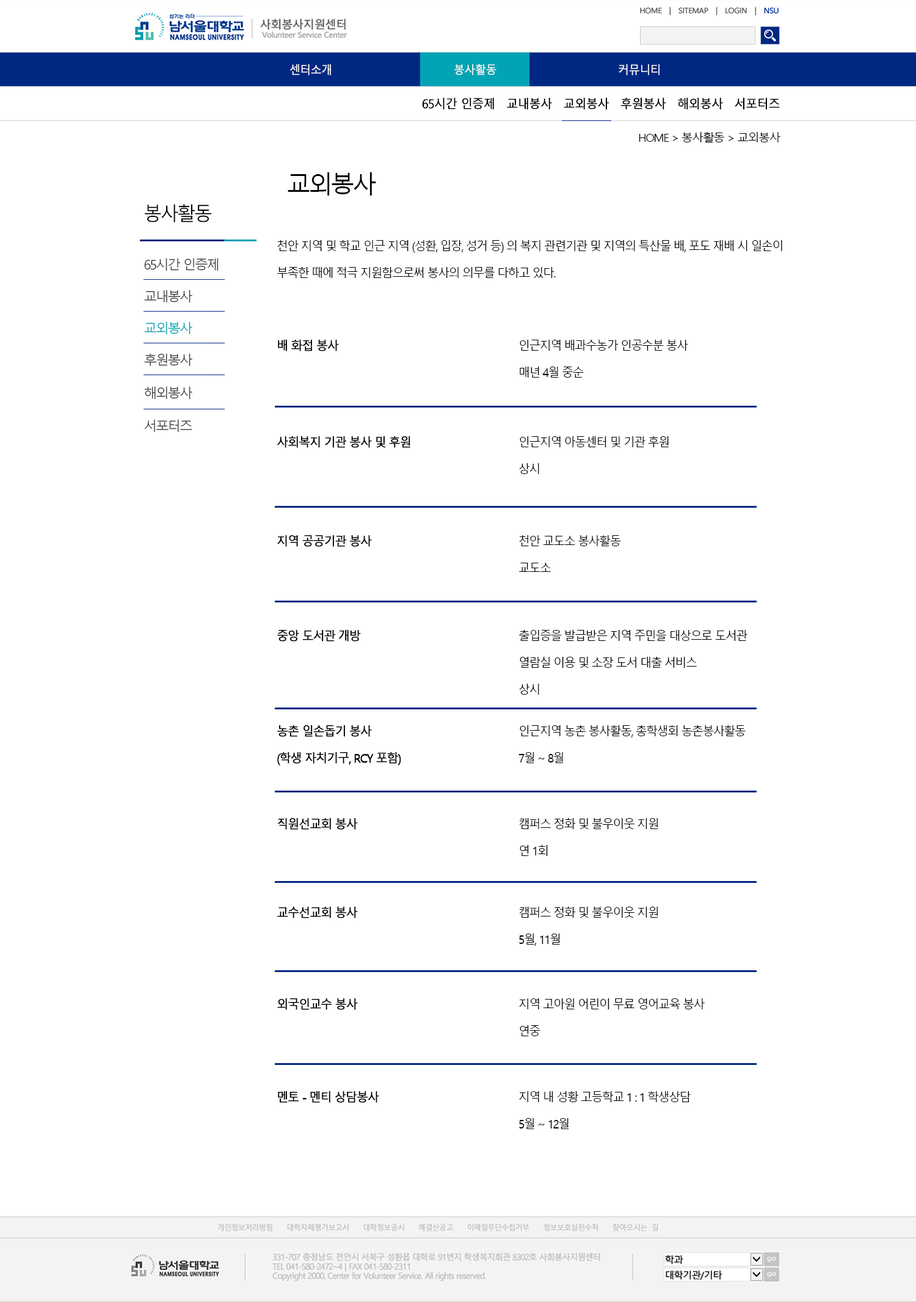
<style>
.page{position:relative;width:916px;height:1302px;background:#ffffff}
.page>*{position:absolute;margin:0}
.t1{font:11.4px "MalgunGothicRegular";letter-spacing:-0.05em;color:#f3f3f3;font-weight:bold;scale:0.95 1}
.t2{font:12.2px "MalgunGothicRegular";letter-spacing:-0.05em;color:#000000;font-weight:bold;scale:0.95 1}
.t3{font:11.3px "MalgunGothicRegular";letter-spacing:-0.1em;color:#000000;scale:1.05 1}
.t4{font:24.4px "MalgunGothicRegular";letter-spacing:-0.1em;color:#000000}
.t5{font:19px "MalgunGothicRegular";letter-spacing:-0.1em;color:#000000}
.t6{font:12.5px/26.9px "MalgunGothicRegular";letter-spacing:-0.1em;color:#000000;scale:0.95 1}
.t7{font:13.2px "MalgunGothicRegular";letter-spacing:-0.1em;color:#454444}
.t8{font:13.2px "MalgunGothicRegular";letter-spacing:-0.1em;color:#01a3b5}
.t9{font:12.5px/26.9px "MalgunGothicRegular";letter-spacing:-0.1em;color:#000000;font-weight:bold;scale:0.95 1}
</style>
<div class="page">
<p class="t1" style="left:290px;top:64px;width:370px;height:11px">센터소개        봉사활동       커뮤니티</p>
<p class="t2" style="left:422px;top:98px;width:358px;height:11px">65시간 인증제　교내봉사　교외봉사　후원봉사　해외봉사　서포터즈</p>
<p class="t3" style="left:639px;top:132px;width:142px;height:11px">HOME &gt; 봉사활동 &gt; 교외봉사</p>
<p class="t4" style="left:288px;top:172px;width:88px;height:23px">교외봉사</p>
<p class="t5" style="left:145px;top:204px;width:66px;height:18px">봉사활동</p>
<p class="t6" style="left:277px;top:240px;width:505px;height:38px">천안 지역 및 학교 인근 지역 (성환, 입장, 성거 등) 의 복지 관련기관 및 지역의 특산물 배, 포도 재배 시 일손이<br>부족한 때에 적극 지원함으로써 봉사의 의무를 다하고 있다.</p>
<p class="t7" style="left:144px;top:258px;width:75px;height:13px">65시간 인증제</p>
<p class="t7" style="left:144px;top:290px;width:48px;height:13px">교내봉사</p>
<p class="t8" style="left:144px;top:321px;width:48px;height:14px">교외봉사</p>
<p class="t6" style="left:278px;top:340px;width:410px;height:37px"><span class="t9">배 화접 봉사</span>          인근지역 배과수농가 인공수분 봉사<br>      　     매년 4월 중순</p>
<p class="t7" style="left:144px;top:353px;width:48px;height:13px">후원봉사</p>
<p class="t7" style="left:144px;top:386px;width:48px;height:13px">해외봉사</p>
<p class="t7" style="left:144px;top:419px;width:48px;height:13px">서포터즈</p>
<p class="t6" style="left:277px;top:436px;width:392px;height:38px"><span class="t9">사회복지 기관 봉사 및 후원    　  </span>인근지역 아동센터 및 기관 후원<br>      　     상시</p>
<p class="t6" style="left:277px;top:535px;width:344px;height:37px"><span class="t9">지역 공공기관 봉사        </span>천안 교도소 봉사활동<br>           교도소</p>
<p class="t6" style="left:277px;top:630px;width:471px;height:64px"><span class="t9">중앙 도서관 개방         </span>출입증을 발급받은 지역 주민을 대상으로 도서관<br>           열람실 이용 및 소장 도서 대출 서비스<br>           상시</p>
<p class="t6" style="left:277px;top:725px;width:469px;height:40px"><span class="t9">농촌 일손돕기 봉사        </span>인근지역 농촌 봉사활동, 총학생회 농촌봉사활동<br><span class="t9">(학생 자치기구, RCY 포함)</span>       7월 ~ 8월</p>
<p class="t6" style="left:277px;top:818px;width:381px;height:38px"><span class="t9">직원선교회 봉사         </span>캠퍼스 정화 및 불우이웃 지원<br>           연 1회</p>
<p class="t6" style="left:277px;top:906px;width:381px;height:39px"><span class="t9">교수선교회 봉사         </span>캠퍼스 정화 및 불우이웃 지원<br>           5월, 11월</p>
<p class="t6" style="left:277px;top:998px;width:428px;height:38px"><span class="t9">외국인교수 봉사         </span>지역 고아원 어린이 무료 영어교육 봉사<br>           연중</p>
<p class="t6" style="left:278px;top:1091px;width:413px;height:38px"><span class="t9">멘토 - 멘티 상담봉사        </span>지역 내 성황 고등학교 1 : 1 학생상담<br>           5월 ~ 12월</p>
</div>
